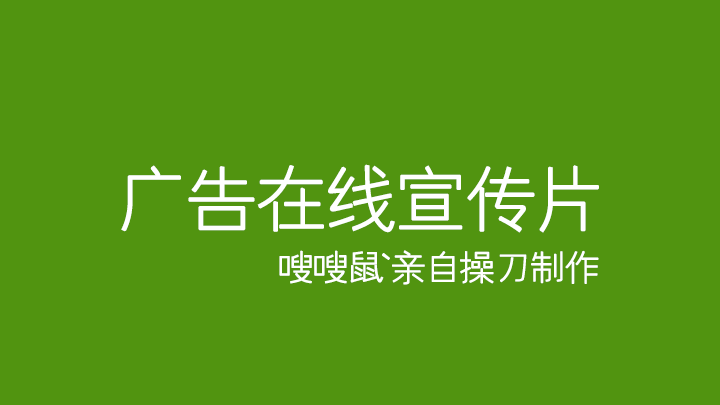
<style>
.page{position:relative;width:720px;height:405px;background:#519410}
.page>*{position:absolute;margin:0}
.t1{font:72px "FZYXJW--GB1-0";letter-spacing:-0.06em;color:#ffffff;font-weight:bold}
.t2{font:36px "FZYXJW--GB1-0";letter-spacing:-0.06em;color:#ffffff;font-weight:bold}
</style>
<div class="page">
<p class="t1" style="left:121px;top:164px;width:478px;height:69px">广告在线宣传片</p>
<p class="t2" style="left:279px;top:250px;width:320px;height:35px">嗖嗖鼠`亲自操刀制作</p>
</div>
